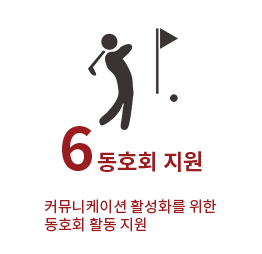
<style>
.page{position:relative;width:262px;height:254px;background:#ffffff}
.page>*{position:absolute;margin:0}
.t1{font:22px "NotoSansKR-Bold";color:#9b1c1f;text-transform:uppercase}
.t2{font:60px "NotoSansKR-Bold";color:#9b1c1f;text-transform:uppercase}
.t3{font:15px/18px "NotoSansKR-Regular";color:#9b1c1f;text-transform:uppercase}
</style>
<div class="page">
<p class="t1" style="left:62px;top:126px;width:140px;height:46px"><span class="t2">6 </span>동호회 지원</p>
<p class="t3" style="left:45px;top:199px;width:171px;height:33px">커뮤니케이션 활성화를 위한<br>동호회 활동 지원</p>
</div>
